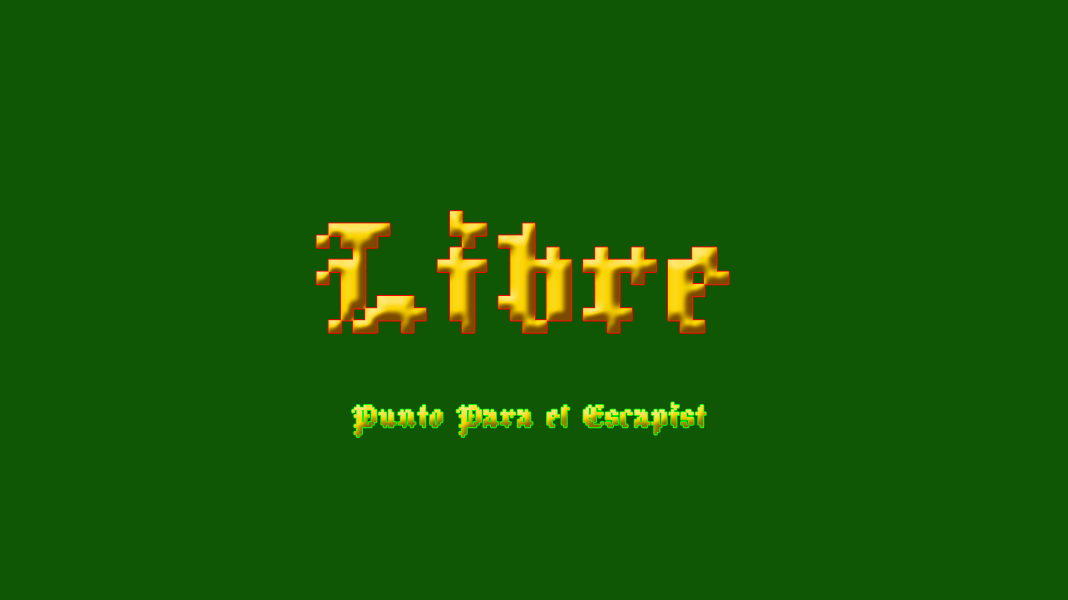
<style>
.page{position:relative;width:1068px;height:600px;background:#0f5605}
.page>*{position:absolute;margin:0}
.t1{font:193.8px "OwreKynge"}
.t2{font:39px "OwreKynge"}
</style>
<div class="page">
<p class="t1" style="left:316px;top:211px;width:413px;height:122px">Libre</p>
<p class="t2" style="left:352px;top:402px;width:354px;height:35px">Punto Para el Escapist</p>
</div>
